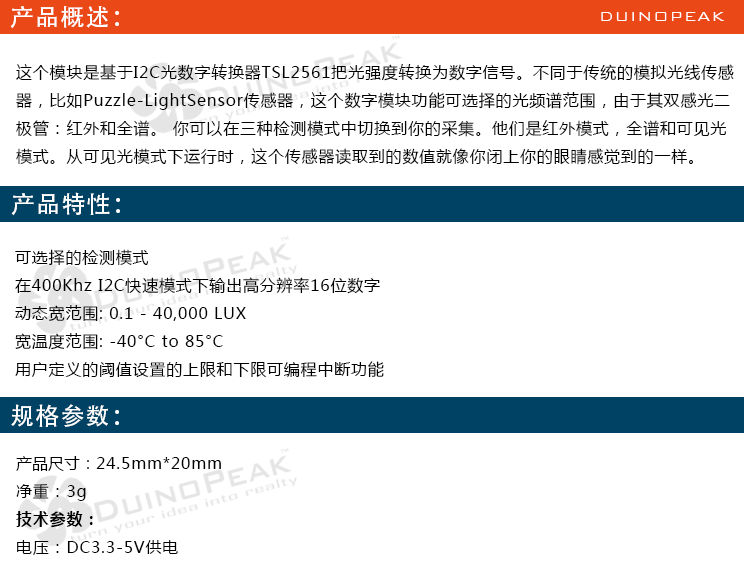
<style>
.page{position:relative;width:744px;height:581px;background:#ffffff}
.page>*{position:absolute;margin:0}
.t1{font:24px "AdobeHeitiStd-Regular";letter-spacing:0.05em;color:#ffffff}
.t2{font:18px "BankGothicBT-Light";letter-spacing:0.05em;color:#ffffff}
.t3{font:16px "MicrosoftYaHei";letter-spacing:0.05em;color:#000000}
</style>
<div class="page">
<p class="t1" style="left:10px;top:6px;width:109px;height:23px">产品概述：</p>
<p class="t2" style="left:601px;top:12px;width:124px;height:9px">DUINOPEAK</p>
<p class="t3" style="left:16px;top:64px;width:718px;height:101px">这个模块是基于I2C光数字转换器TSL2561把光强度转换为数字信号。不同于传统的模拟光线传感<br>器，比如Puzzle-LightSensor传感器，这个数字模块功能可选择的光频谱范围，由于其双感光二<br>极管：红外和全谱。 你可以在三种检测模式中切换到你的采集。他们是红外模式，全谱和可见光<br>模式。从可见光模式下运行时，这个传感器读取到的数值就像你闭上你的眼睛感觉到的一样。</p>
<p class="t1" style="left:11px;top:192px;width:109px;height:24px">产品特性：</p>
<p class="t3" style="left:15px;top:249px;width:369px;height:129px">可选择的检测模式<br>在400Khz I2C快速模式下输出高分辨率16位数字<br>动态宽范围: 0.1 - 40,000 LUX<br>宽温度范围: -40°C to 85°C<br>用户定义的阈值设置的上限和下限可编程中断功能</p>
<p class="t1" style="left:11px;top:404px;width:108px;height:23px">规格参数：</p>
</div>
